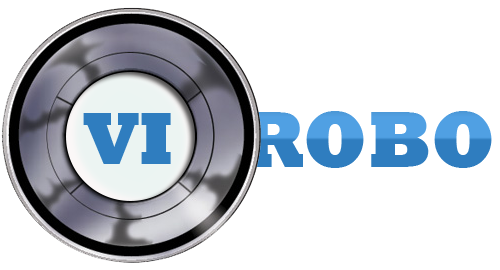
<style>
.page{position:relative;width:500px;height:270px;background:#ffffff}
.page>*{position:absolute;margin:0}
.t1{font:80.6px "Rockwell-ExtraBold";scale:0.92 1}
</style>
<div class="page">
<p class="t1" style="left:244px;top:111px;width:248px;height:57px">ROBO</p>
</div>
